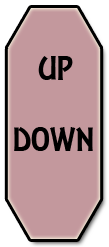
<style>
.page{position:relative;width:109px;height:247px;background:#c3989d}
.page>*{position:absolute;margin:0}
.t1{font:36px "ARESSENCE";color:#000000}
</style>
<div class="page">
<p class="t1" style="left:38px;top:56px;width:35px;height:24px">UP</p>
<p class="t1" style="left:14px;top:127px;width:79px;height:24px">DOWN</p>
</div>
